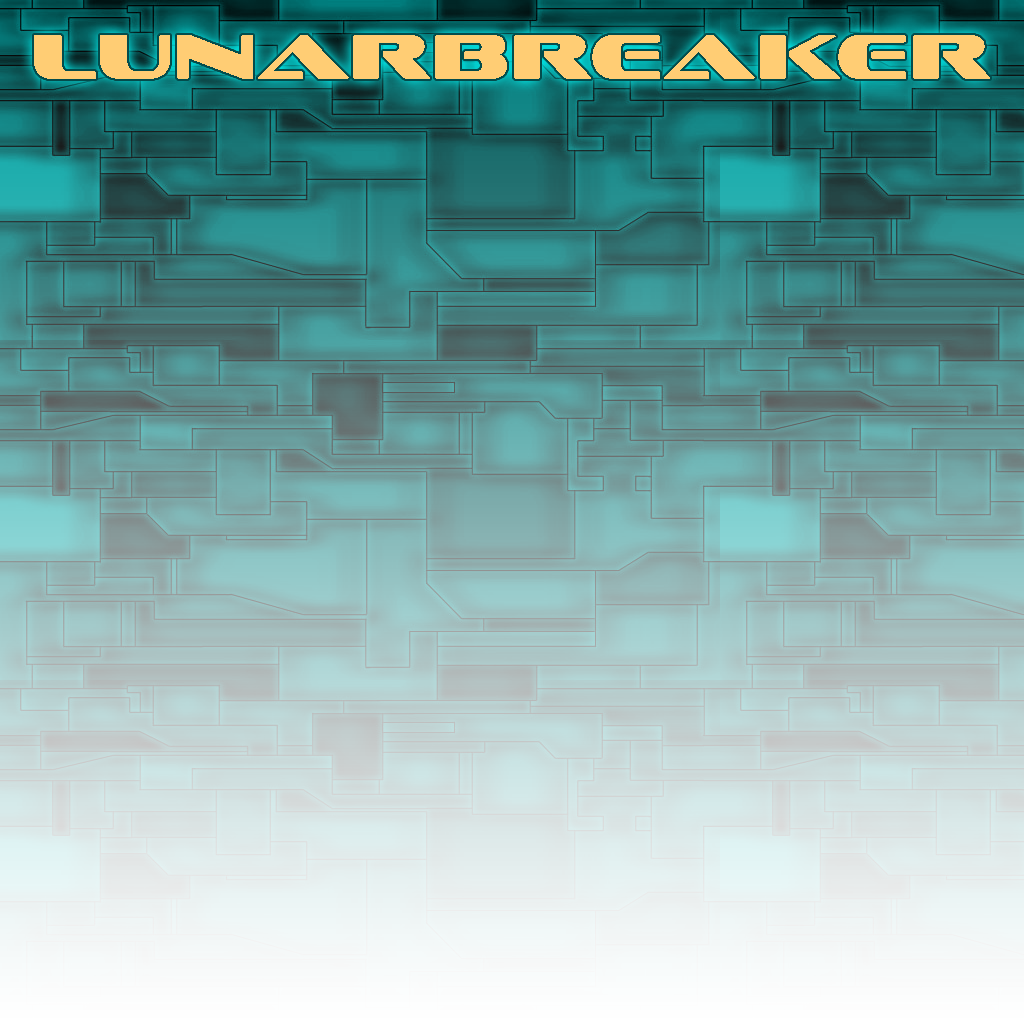
<style>
.page{position:relative;width:1024px;height:1024px}
.page>*{position:absolute;margin:0}
.t1{font:64px "SofachromeRg-Regular";letter-spacing:0.025em;color:#ffcd74}
</style>
<div class="page">
<p class="t1" style="left:34px;top:35px;width:956px;height:44px">LunarBreaker</p>
</div>
